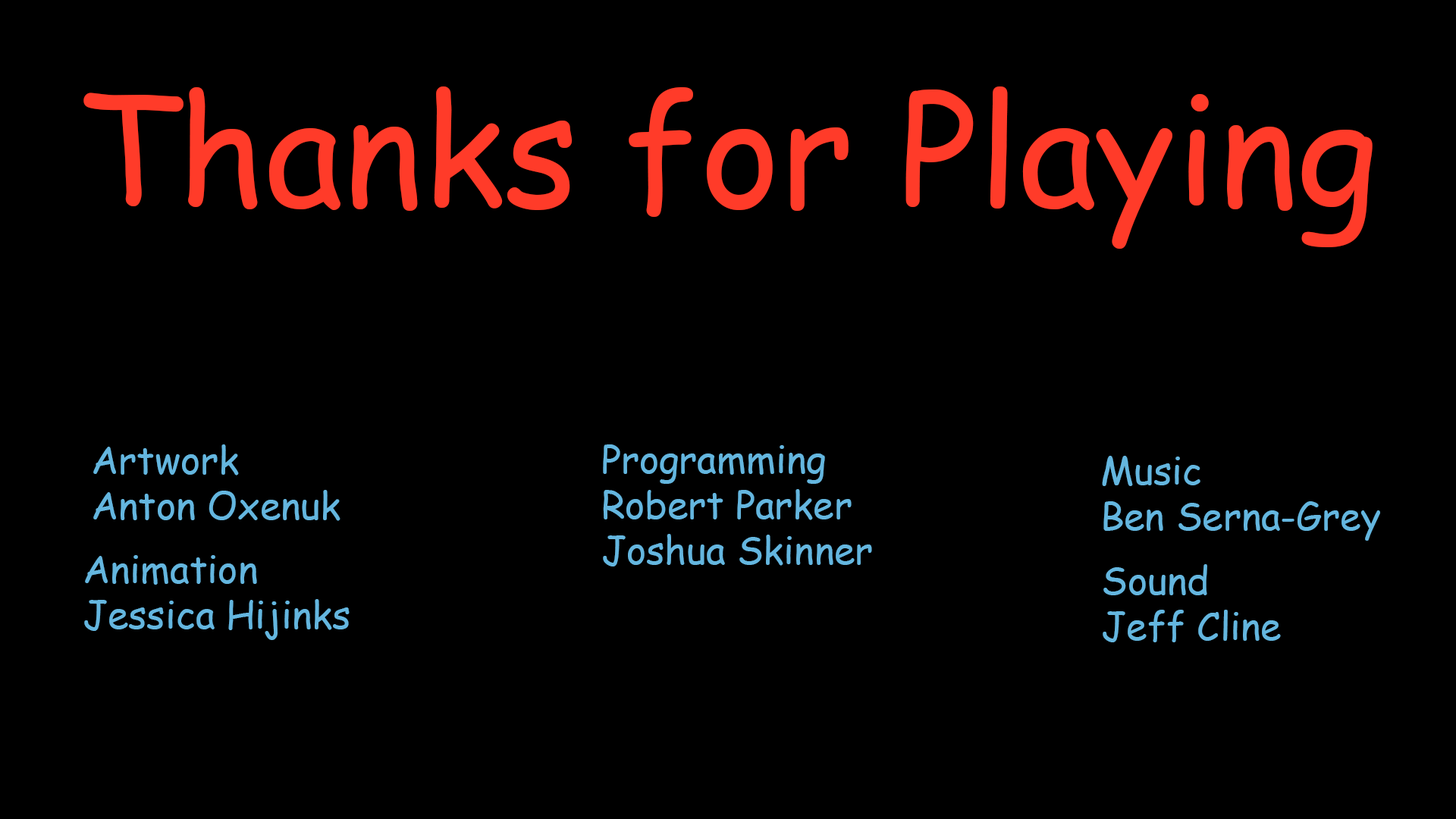
<style>
.page{position:relative;width:1456px;height:819px;background:#000000}
.page>*{position:absolute;margin:0}
.t1{font:151.7px "ComicSansMS";color:#ff3b29}
.t2{font:37.9px "ComicSansMS";color:#64b6df}
</style>
<div class="page">
<p class="t1" style="left:83px;top:86px;width:1290px;height:163px">Thanks for Playing</p>
<p class="t2" style="left:93px;top:444px;width:247px;height:77px">Artwork<br>Anton Oxenuk</p>
<p class="t2" style="left:603px;top:444px;width:269px;height:122px">Programming<br>Robert Parker<br>Joshua Skinner</p>
<p class="t2" style="left:1102px;top:456px;width:278px;height:85px">Music<br>Ben Serna-Grey</p>
<p class="t2" style="left:84px;top:555px;width:266px;height:85px">Animation<br>Jessica Hijinks</p>
<p class="t2" style="left:1103px;top:564px;width:178px;height:78px">Sound<br>Jeff Cline</p>
</div>
